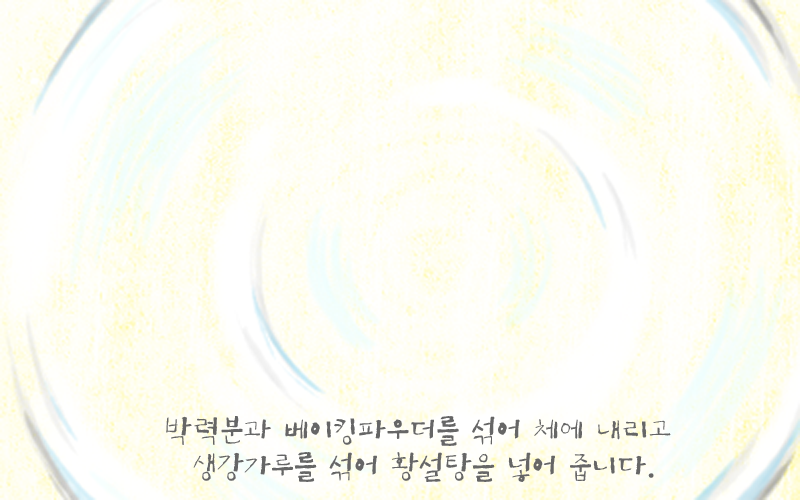
<style>
.page{position:relative;width:800px;height:500px}
.page>*{position:absolute;margin:0}
.t1{font:30px/36px "KoreanYJ-R";color:#666666}
</style>
<div class="page">
<p class="t1" style="left:166px;top:416px;width:505px;height:66px;text-align:center">박력분과 베이킹파우더를 섞어 체에 내리고 <br>생강가루를 섞어 황설탕을 넣어 줍니다.</p>
</div>
